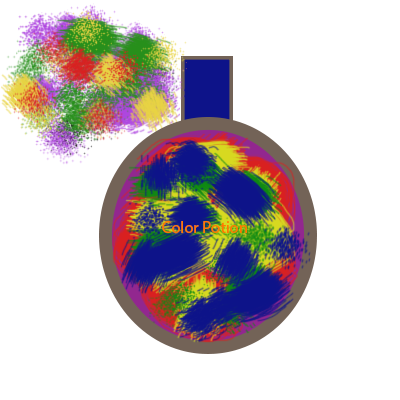
<style>
.page{position:relative;width:400px;height:400px;background:#ffffff}
.page>*{position:absolute;margin:0}
.t1{font:16.7px "MyriadPro-Regular";color:#ff7800}
</style>
<div class="page">
<p class="t1" style="left:162px;top:221px;width:85px;height:12px">Color Potion</p>
</div>
